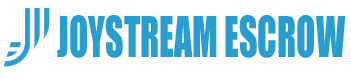
<style>
.page{position:relative;width:351px;height:79px;background:#ffffff}
.page>*{position:absolute;margin:0}
.t1{font:52px "Impact";color:#299dcd;scale:0.69 1}
</style>
<div class="page">
<p class="t1" style="left:57px;top:15px;width:289px;height:43px">JOYSTREAM ESCROW</p>
</div>
